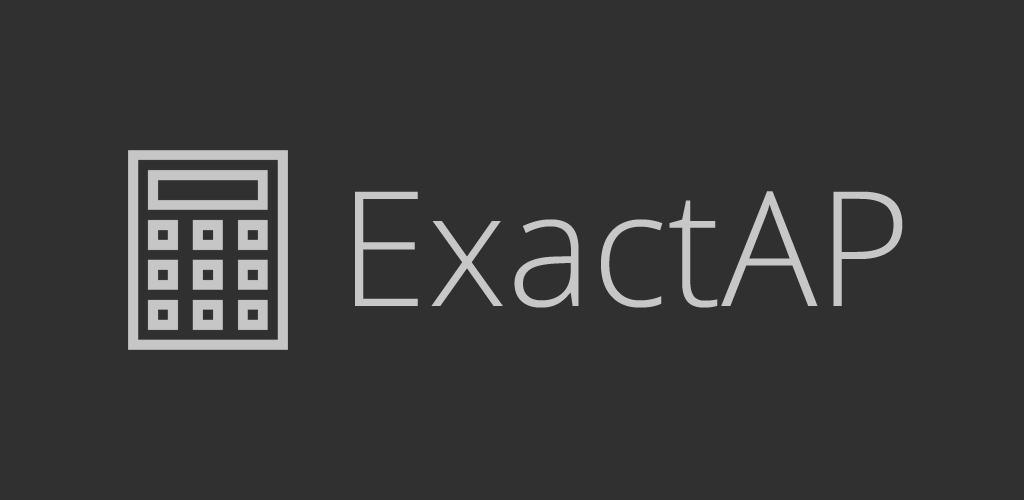
<style>
.page{position:relative;width:1024px;height:500px;background:#303030}
.page>*{position:absolute;margin:0}
.t1{font:160px "OpenSans-Light";color:#c8c8c8}
</style>
<div class="page">
<p class="t1" style="left:355px;top:191px;width:548px;height:117px">ExactAP</p>
</div>
